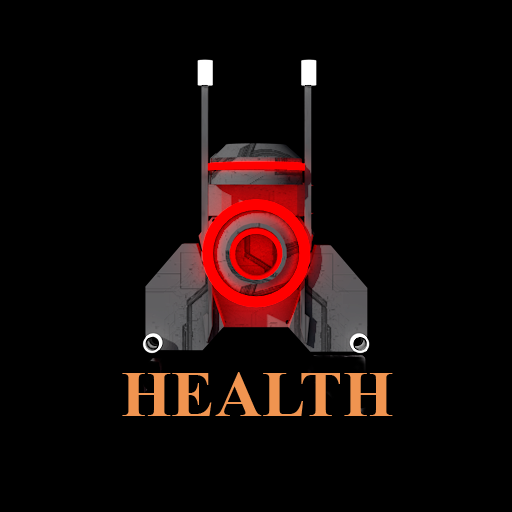
<style>
.page{position:relative;width:512px;height:512px;background:#000000}
.page>*{position:absolute;margin:0}
.t1{font:65px "TimesNewRomanPS-BoldMT";color:#f09450}
</style>
<div class="page">
<p class="t1" style="left:122px;top:372px;width:271px;height:44px">HEALTH</p>
</div>
